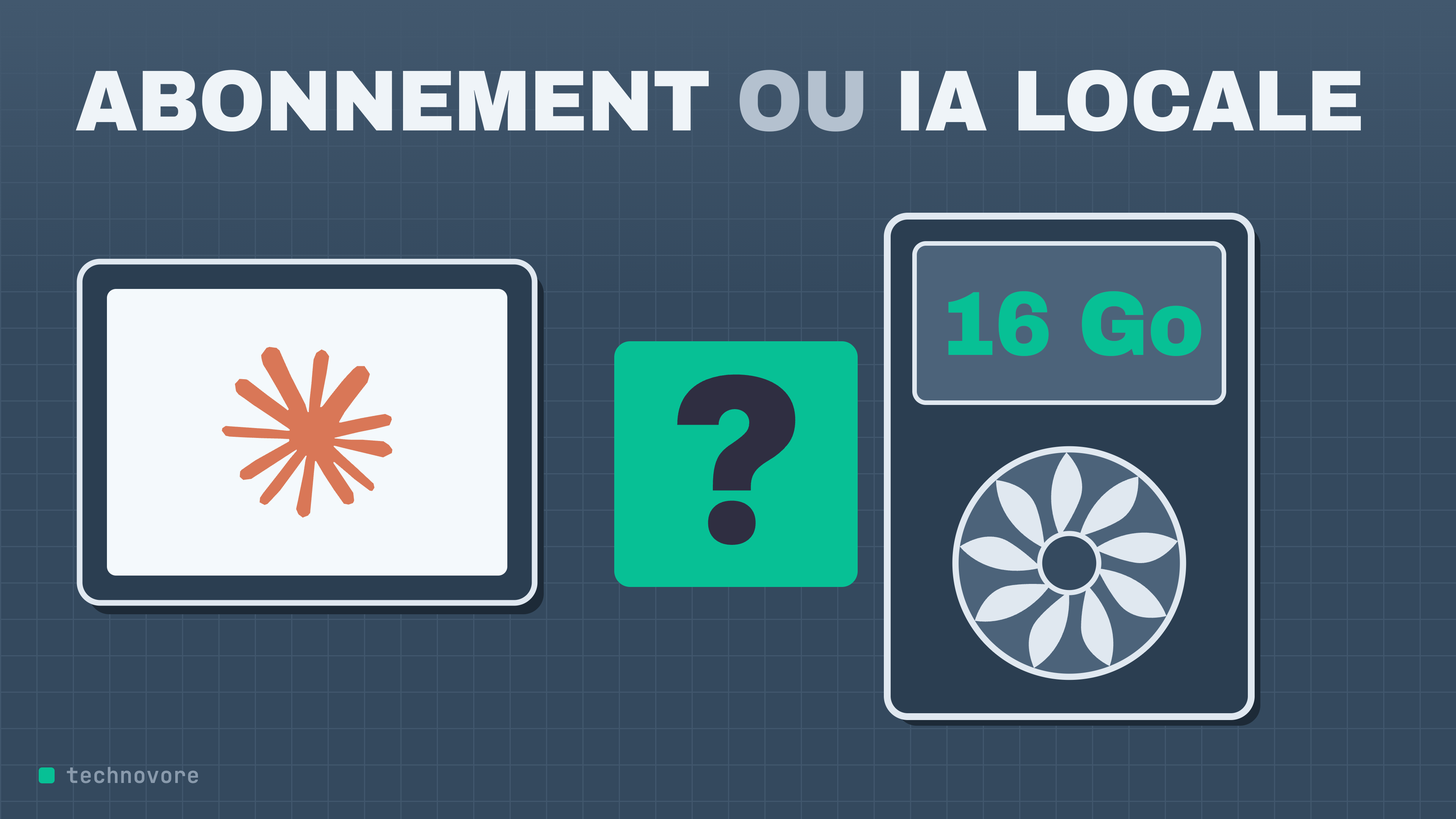
<style>
.page{position:relative;width:1456px;height:819px;background:#34495e}
.page>*{position:absolute;margin:0}
.t1{font:86.4px "ArchivoBlack-Regular";letter-spacing:-0.01em;color:#eff4f8;scale:0.93 1}
.t2{font:86.4px "ArchivoBlack-Regular";letter-spacing:-0.01em;color:#b4c1cf;scale:0.93 1}
.t3{font:91px "ArchivoBlack-Regular";letter-spacing:-0.01em;color:#07c095;scale:0.93 1}
</style>
<div class="page">
<p class="t1" style="left:75px;top:70px;width:1286px;height:62px">ABONNEMENT <span class="t2">OU</span> IA LOCALE</p>
<p class="t3" style="left:948px;top:291px;width:254px;height:65px">16 Go</p>
</div>
